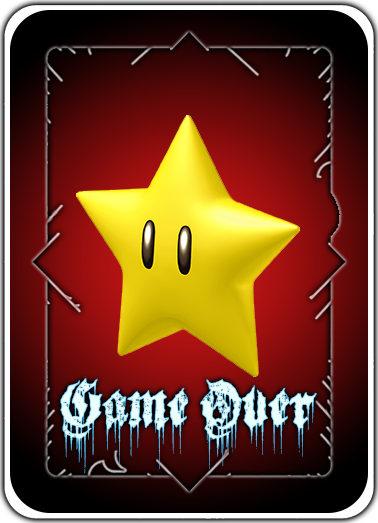
<style>
.page{position:relative;width:378px;height:523px}
.page>*{position:absolute;margin:0}
.t1{font:57.8px "BurnTheWitch";color:#e2fbfc;scale:0.88 1}
</style>
<div class="page">
<p class="t1" style="left:60px;top:378px;width:257px;height:96px">Game Over</p>
</div>
